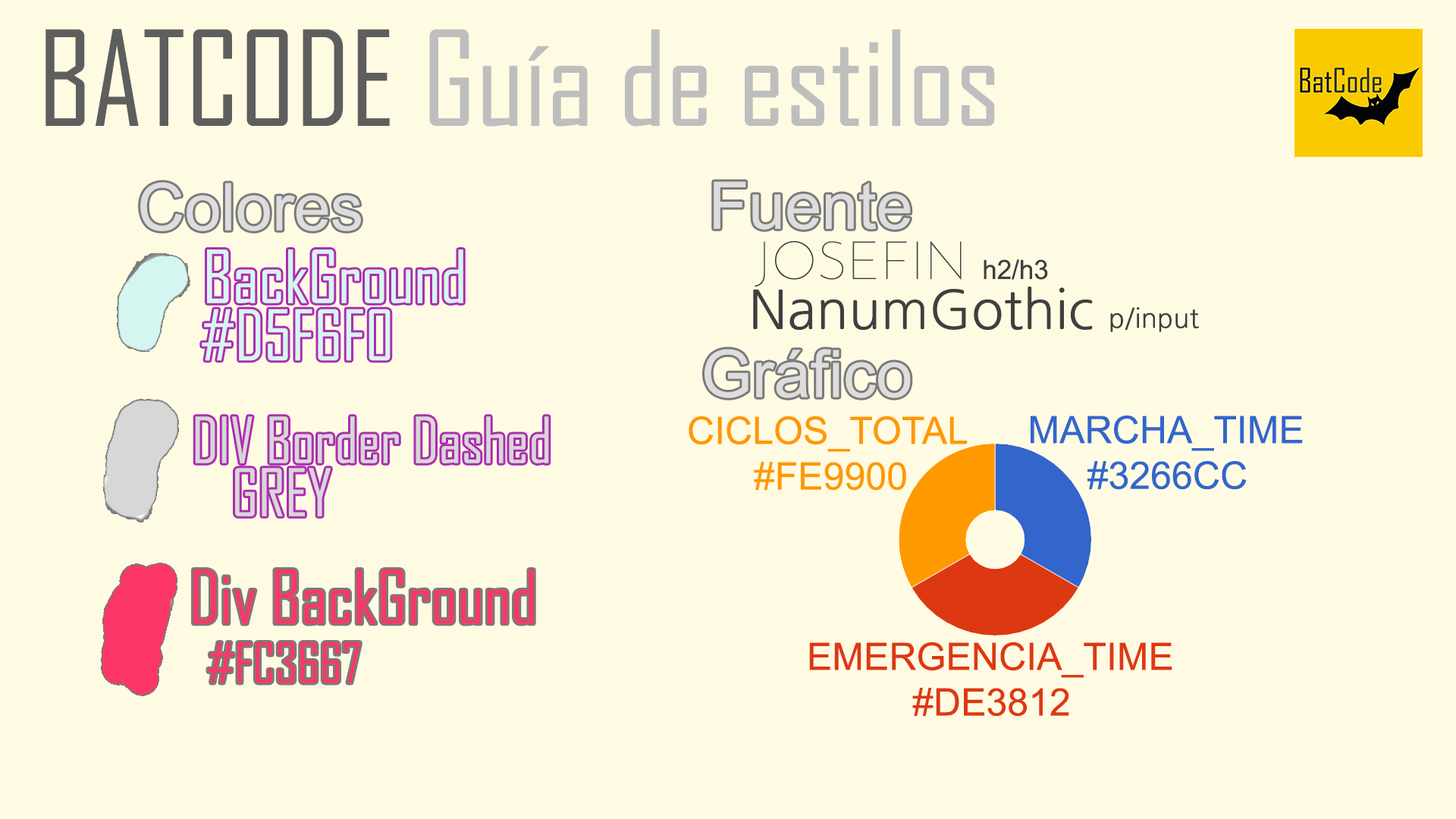
<style>
.page{position:relative;width:1456px;height:819px;background:#fffbe3}
.page>*{position:absolute;margin:0}
.t1{font:126.3px "AgencyFB-Reg";color:#5e5e5e}
.t2{font:126.3px "AgencyFB-Reg";color:#bebebe}
.t3{font:53.2px "JosefinSans-Thin";color:#403e3e}
.t4{font:26.6px "ArialMT";color:#403e3e}
.t5{font:69.9px "AgencyFB-Reg";color:#d5f6f0}
.t6{font:53.2px "NanumGothic";color:#403e3e}
.t7{font:26.6px "NanumGothic";color:#403e3e}
.t8{font:66.7px "AgencyFB-Reg";color:#d5f6f0}
.t9{font:38px "ArialMT";color:#fe9900}
.t10{font:38px "ArialMT";color:#3266cc}
.t11{font:70.6px "AgencyFB-Reg";color:#fc3667}
.t12{font:38px "ArialMT";color:#de3812}
.t13{font:52.9px "AgencyFB-Reg";color:#fc3667}
</style>
<div class="page">
<p class="t1" style="left:45px;top:29px;width:345px;height:97px">BATCODE</p>
<p class="t2" style="left:429px;top:29px;width:566px;height:98px">Guía de estilos</p>
<p class="t3" style="left:755px;top:240px;width:293px;height:47px">JOSEFIN <span class="t4">h2/h3</span></p>
<p class="t5" style="left:207px;top:249px;width:256px;height:54px">BackGround</p>
<p class="t6" style="left:753px;top:287px;width:446px;height:45px">NanumGothic <span class="t7">p/input</span></p>
<p class="t8" style="left:202px;top:309px;width:189px;height:52px">#D5F6F0</p>
<p class="t9" style="left:689px;top:416px;width:279px;height:75px;text-align:center">CICLOS_TOTAL <br>#FE9900</p>
<p class="t10" style="left:1031px;top:415px;width:272px;height:75px;text-align:center">MARCHA_TIME <br>#3266CC</p>
<p class="t11" style="left:193px;top:570px;width:341px;height:54px">Div BackGround</p>
<p class="t12" style="left:809px;top:642px;width:363px;height:75px;text-align:center">EMERGENCIA_TIME <br>#DE3812</p>
<p class="t13" style="left:208px;top:642px;width:152px;height:41px">#FC3667</p>
</div>
